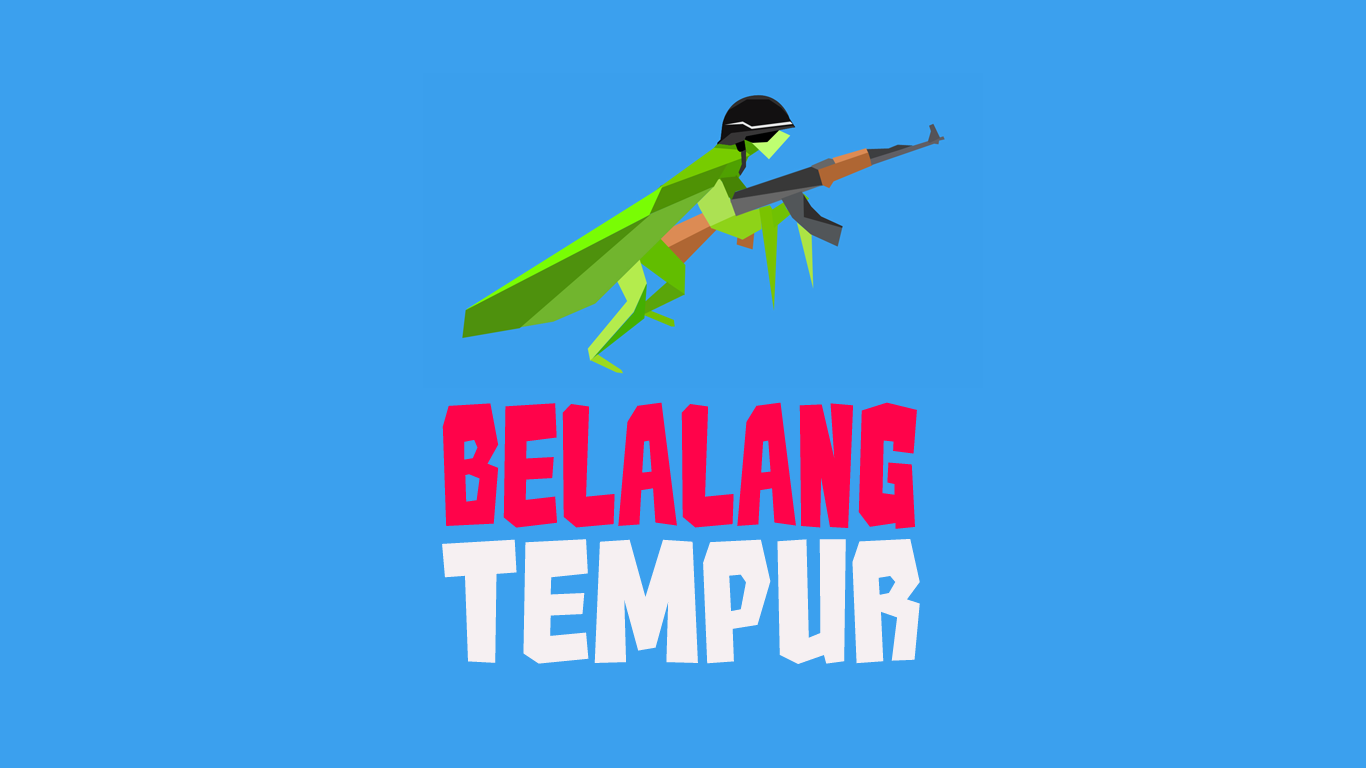
<style>
.page{position:relative;width:1366px;height:768px;background:#3ba0ee}
.page>*{position:absolute;margin:0}
.t1{font:150px "Kaiju-Monster__G";color:#ff034a}
.t2{font:150.1px "Kaiju-Monster__G";color:#f6f0f2;scale:1.22 1}
</style>
<div class="page">
<p class="t1" style="left:442px;top:402px;width:475px;height:127px">BELALANG</p>
<p class="t2" style="left:442px;top:539px;width:478px;height:125px">TEMPUR</p>
</div>
